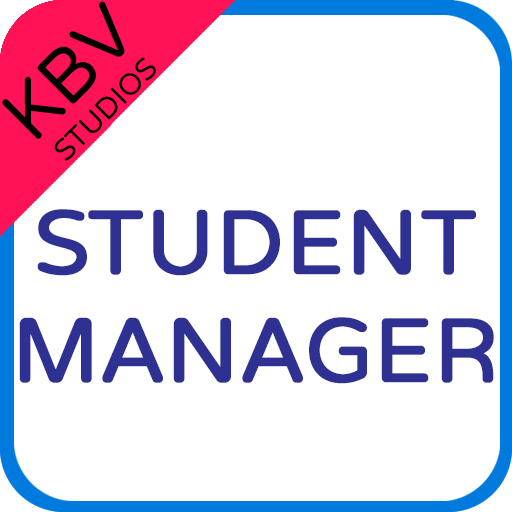
<style>
.page{position:relative;width:512px;height:512px;background:#ffffff}
.page>*{position:absolute;margin:0}
.t1{font:30px "VarelaRound";color:#000000}
.t2{font:75px "VarelaRound";color:#000000}
.t3{font:90px "VarelaRound";color:#2e3192;font-weight:bold}
</style>
<div class="page">
<p class="t1" style="left:2px;top:1px;width:154px;height:160px;text-align:center;rotate:-45deg"><span class="t2">KBV<br></span>STUDIOS</p>
<p class="t3" style="left:19px;top:209px;width:475px;height:175px;text-align:center">STUDENT<br>MANAGER</p>
</div>
